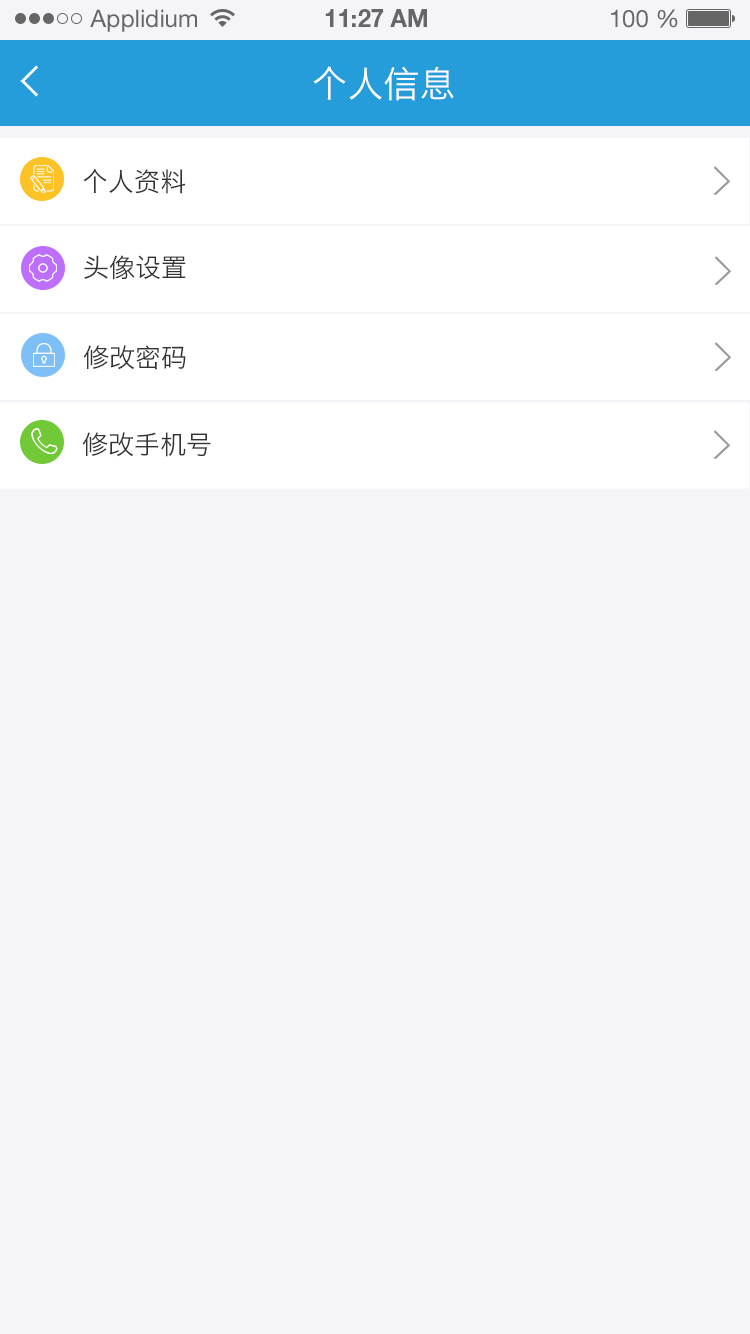
<style>
.page{position:relative;width:750px;height:1334px;background:#f5f4f9}
.page>*{position:absolute;margin:0}
.t1{font:24px "HelveticaNeueLTStd-Roman";color:#666666}
.t2{font:24px "HelveticaNeueLTStd-Bd";color:#666666}
.t3{font:36px "HiraginoSansGB-W3";color:#ffffff;text-transform:uppercase}
.t4{font:26px "HiraginoSansGB-W3";color:#333333;text-transform:uppercase}
</style>
<div class="page">
<p class="t1" style="left:90px;top:9px;width:107px;height:23px">Applidium</p>
<p class="t2" style="left:325px;top:9px;width:102px;height:18px">11:27 AM</p>
<p class="t1" style="left:611px;top:9px;width:67px;height:19px">100 %</p>
<p class="t3" style="left:313px;top:66px;width:141px;height:35px">个人信息</p>
<p class="t4" style="left:83px;top:169px;width:102px;height:25px">个人资料</p>
<p class="t4" style="left:84px;top:255px;width:102px;height:25px">头像设置</p>
<p class="t4" style="left:83px;top:345px;width:103px;height:25px">修改密码</p>
<p class="t4" style="left:82px;top:432px;width:129px;height:25px">修改手机号</p>
</div>
